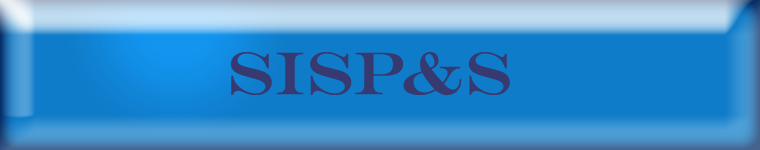
<style>
.page{position:relative;width:760px;height:150px;background:#0f7cc9}
.page>*{position:absolute;margin:0}
.t1{font:60px "EngraversMT";color:#363a70;font-weight:bold}
</style>
<div class="page">
<p class="t1" style="left:230px;top:52px;width:280px;height:44px">SISP&amp;S</p>
</div>
